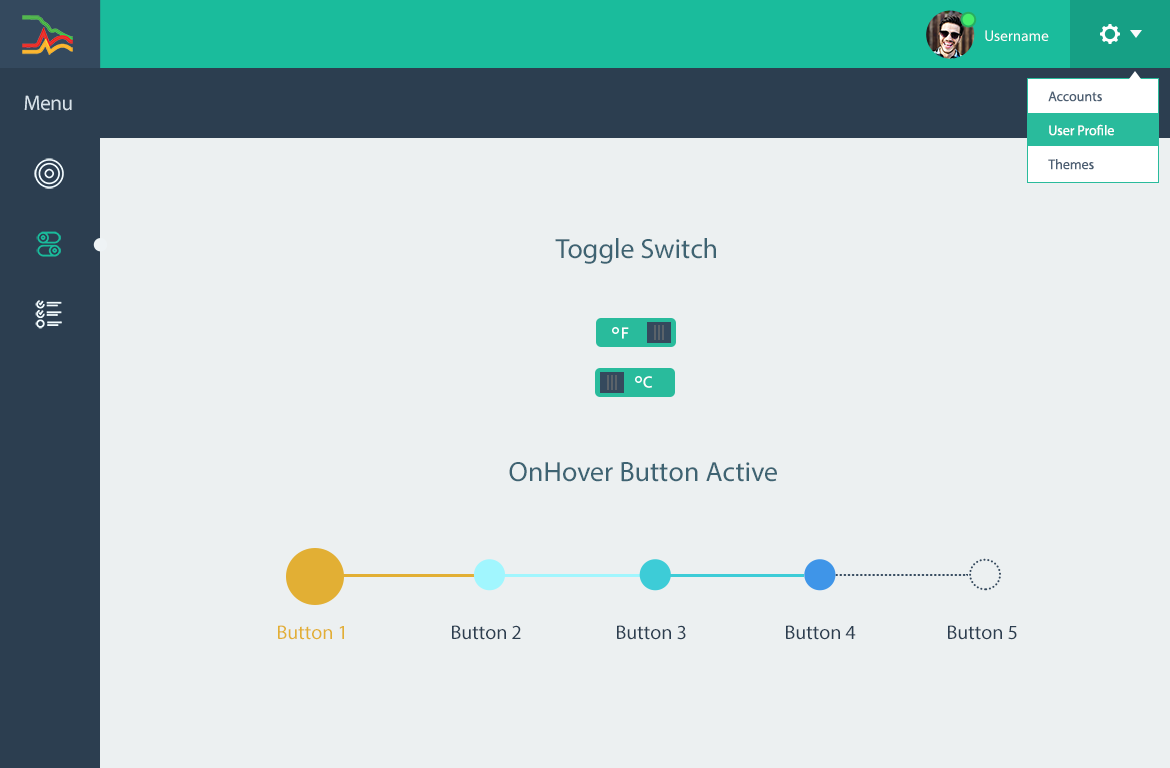
<style>
.page{position:relative;width:1170px;height:768px;background:#ecf0f1}
.page>*{position:absolute;margin:0}
.t1{font:15.2px "MyriadPro-Regular";color:#ffffff}
.t2{font:21.1px "MyriadPro-Regular";letter-spacing:-0.02em;color:#d7e2ea}
.t3{font:14px "MyriadPro-Regular";color:#4d5f73}
.t4{font:14px "MyriadPro-Regular";color:#ffffff}
.t5{font:28px "MyriadPro-Regular";color:#3e6372}
.t6{font:16px "MyriadPro-Regular";letter-spacing:0.025em;color:#ffffff}
.t7{font:20px "MyriadPro-Regular";color:#e2af34}
.t8{font:20px "MyriadPro-Regular";color:#2c3e50}
</style>
<div class="page">
<p class="t1" style="left:985px;top:30px;width:64px;height:11px">Username</p>
<p class="t2" style="left:24px;top:95px;width:48px;height:16px">Menu</p>
<p class="t3" style="left:1048px;top:91px;width:54px;height:11px">Accounts</p>
<p class="t4" style="left:1049px;top:124px;width:65px;height:12px">User Profile</p>
<p class="t3" style="left:1048px;top:159px;width:46px;height:11px">Themes</p>
<p class="t5" style="left:555px;top:238px;width:161px;height:26px">Toggle Switch</p>
<p class="t6" style="left:622px;top:327px;width:7px;height:12px">F</p>
<p class="t6" style="left:643px;top:376px;width:9px;height:12px">C</p>
<p class="t5" style="left:509px;top:462px;width:268px;height:20px">OnHover Button Active</p>
<p class="t7" style="left:278px;top:625px;width:66px;height:15px">Button 1</p>
<p class="t8" style="left:452px;top:625px;width:69px;height:15px">Button 2</p>
<p class="t8" style="left:617px;top:625px;width:69px;height:15px">Button 3</p>
<p class="t8" style="left:786px;top:625px;width:70px;height:15px">Button 4</p>
<p class="t8" style="left:948px;top:625px;width:69px;height:15px">Button 5</p>
</div>
